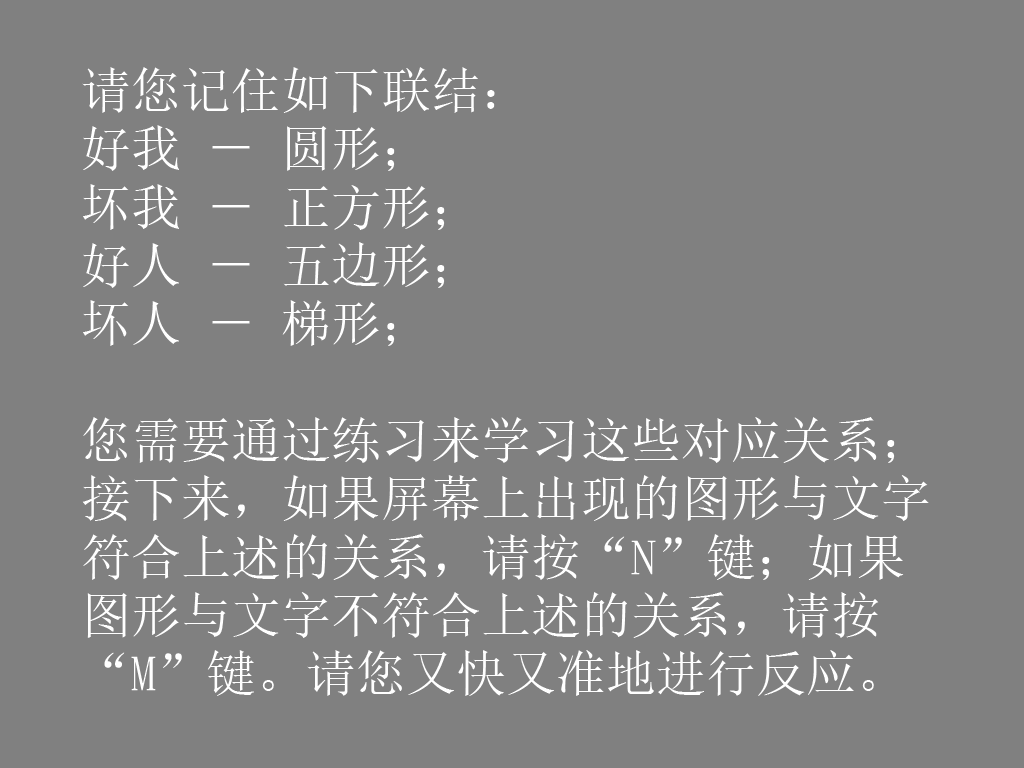
<style>
.page{position:relative;width:1024px;height:768px;background:#808080}
.page>*{position:absolute;margin:0}
.t1{font:50px/58.3px "SimSun";color:#ffffff}
</style>
<div class="page">
<p class="t1" style="left:82px;top:67px;width:847px;height:629px">请您记住如下联结： <br>好我 － 圆形；<br>坏我 － 正方形；<br>好人 － 五边形；<br>坏人 － 梯形；<br><br>您需要通过练习来学习这些对应关系；<br>接下来，如果屏幕上出现的图形与文字<br>符合上述的关系，请按“N”键；如果<br>图形与文字不符合上述的关系，请按<br>“M”键。请您又快又准地进行反应。</p>
</div>
